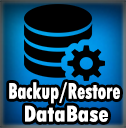
<style>
.page{position:relative;width:126px;height:128px;background:#000000}
.page>*{position:absolute;margin:0}
.t1{font:23.8px "TwCenMT-CondensedExtraBold";color:#ffffff;scale:0.78 1}
.t2{font:24px "TwCenMT-CondensedExtraBold";color:#ffffff}
</style>
<div class="page">
<p class="t1" style="left:9px;top:82px;width:111px;height:22px">Backup/Restore</p>
<p class="t2" style="left:25px;top:105px;width:83px;height:17px">DataBase</p>
</div>
